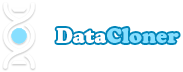
<style>
.page{position:relative;width:183px;height:72px;background:#ffffff}
.page>*{position:absolute;margin:0}
.t1{font:20px "CooperBlackStd";color:#87dfff}
.t2{font:20px "CooperBlackStd";color:#ffffff}
</style>
<div class="page">
<p class="t1" style="left:56px;top:28px;width:123px;height:15px"><span class="t2">Data</span>Cloner</p>
</div>
